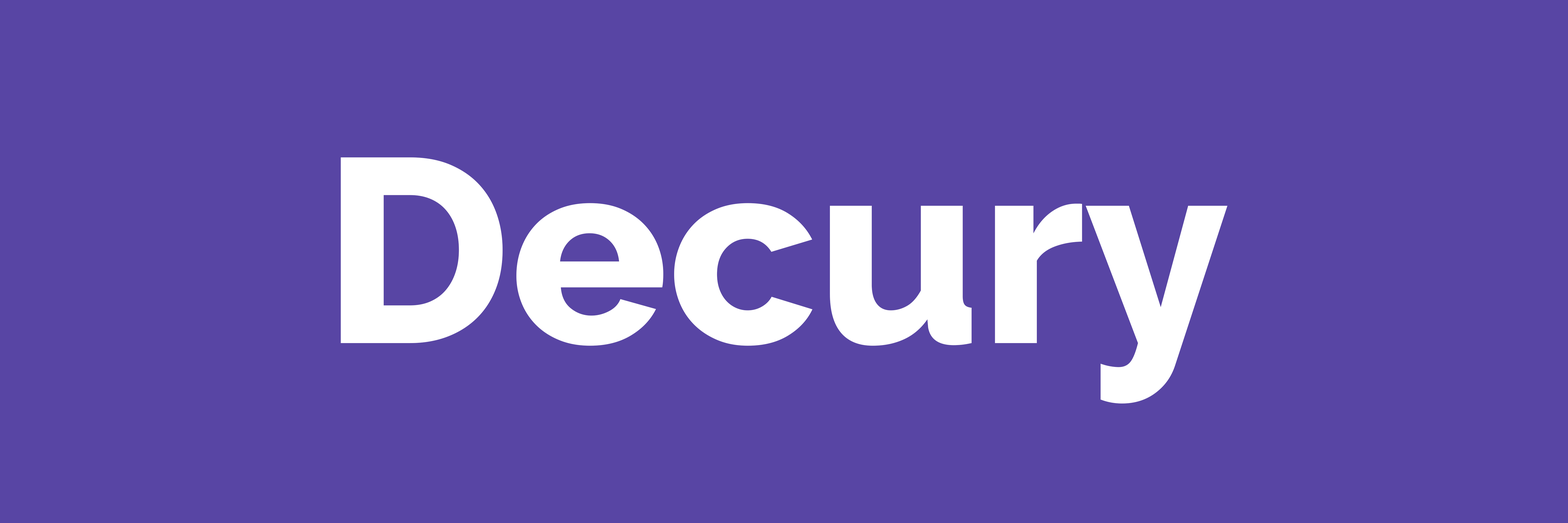
<style>
.page{position:relative;width:1568px;height:523px;background:#5845a4}
.page>*{position:absolute;margin:0}
.t1{font:261.2px "Raleway-ExtraBold";color:#ffffff}
</style>
<div class="page">
<p class="t1" style="left:341px;top:157px;width:886px;height:246px">Decury</p>
</div>
